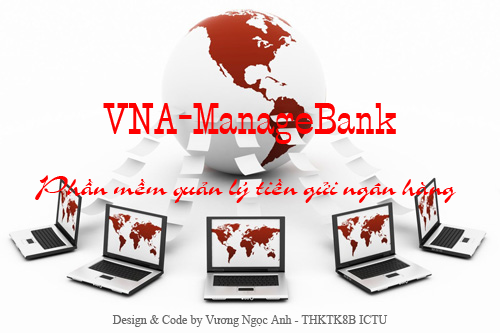
<style>
.page{position:relative;width:500px;height:333px;background:#fdfdfd}
.page>*{position:absolute;margin:0}
.t1{font:30px "VN-StageCoach-Regular";color:#fe0000}
.t2{font:30px "VNI-Slogan";color:#fe0000}
.t3{font:12px "TimesNewRomanPSMT";color:#696969}
</style>
<div class="page">
<p class="t1" style="left:103px;top:103px;width:293px;height:41px">VNA-ManageBank</p>
<p class="t2" style="left:35px;top:175px;width:421px;height:28px">Phaàn meàm quaûn lyù tieàn göûi ngaân haøng</p>
<p class="t3" style="left:112px;top:315px;width:276px;height:12px">Design &amp; Code by Vương Ngọc Anh - THKTK8B ICTU</p>
</div>
